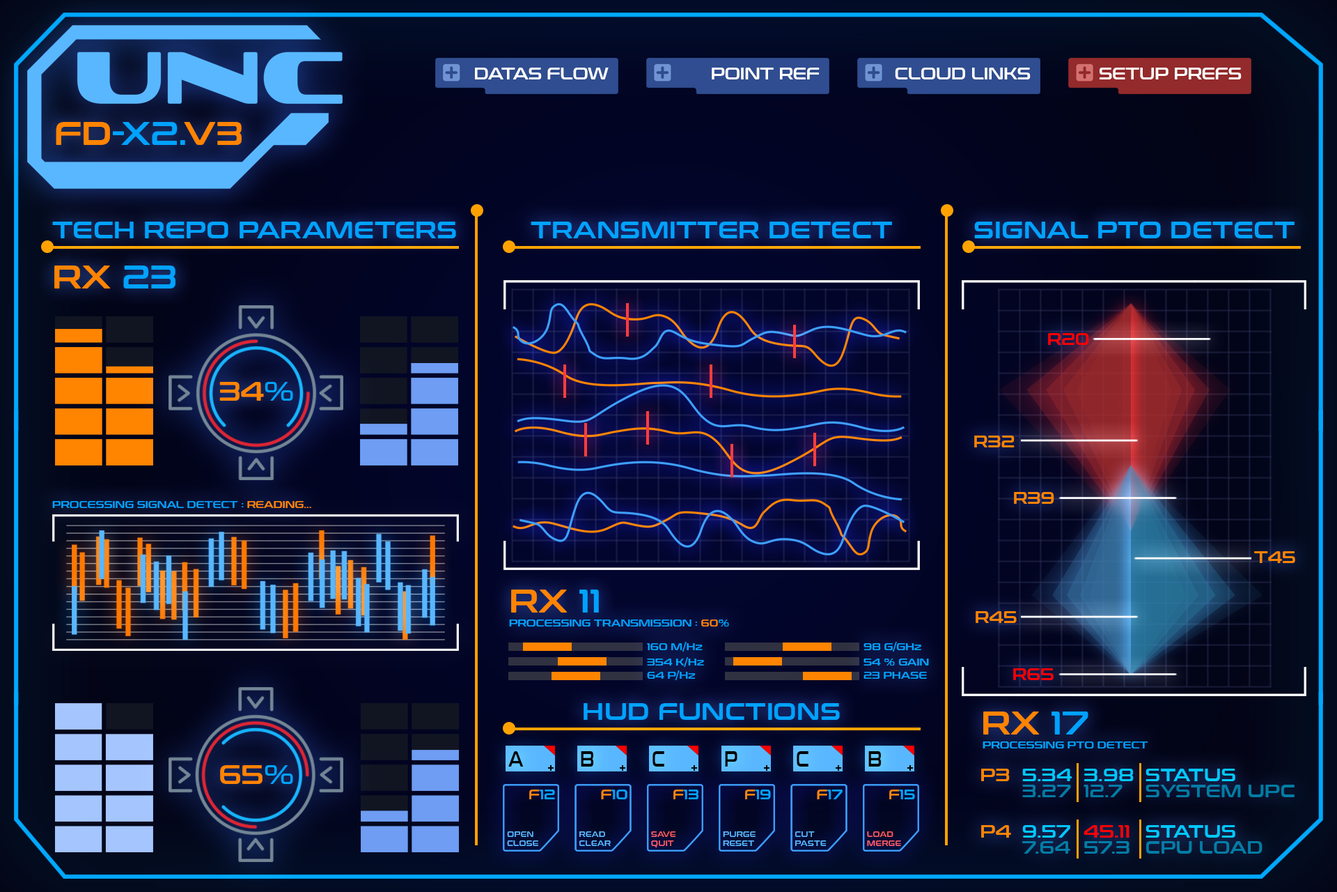
<style>
.page{position:relative;width:1337px;height:892px}
.page>*{position:absolute;margin:0}
.t1{font:15.8px "ConthraxSb-Regular";color:#fffffe}
.t2{font:32.7px "ConthraxSb-Regular";color:#00a2ff}
.t3{font:32.7px "ConthraxSb-Regular";color:#ff8400}
.t4{font:24px "ConthraxSb-Regular";color:#00a2ff}
.t5{font:15.8px "ConthraxSb-Regular";color:#ff0000}
.t6{font:26.2px "ConthraxSb-Regular";color:#ff8400}
.t7{font:26.2px "ConthraxSb-Regular";color:#00a2ff}
.t8{font:15.8px "ConthraxSb-Regular";color:#ff8400}
.t9{font:9.8px "ConthraxSb-Regular";color:#00a2ff}
.t10{font:9.8px "ConthraxSb-Regular";color:#ff8400}
.t11{font:21.3px "ConthraxSb-Regular";color:#010100;scale:0.72 1}
.t12{font:17.7px "ConthraxSb-Regular";color:#ff8400}
.t13{font:17.7px "ConthraxSb-Regular";color:#00c6ff}
.t14{font:17.7px "ConthraxSb-Regular";color:#027ca5}
.t15{font:17.7px "ConthraxSb-Regular";color:#027ca3}
.t16{font:13.2px "ConthraxSb-Regular";color:#00a2ff}
.t17{font:13.2px "ConthraxSb-Regular";color:#ff8400}
.t18{font:7.4px "ConthraxSb-Regular";color:#5bbaff}
.t19{font:7.4px "ConthraxSb-Regular";color:#ff5c68}
.t20{font:7.4px "ConthraxSb-Regular";color:#ff5c6a}
.t21{font:17.7px "ConthraxSb-Regular";color:#ff0000}
.t22{font:17.7px "ConthraxSb-Regular";color:#027da6}
.t23{font:17.7px "ConthraxSb-Regular";color:#027da5}
</style>
<div class="page">
<p class="t1" style="left:475px;top:68px;width:134px;height:11px">DATAS FLOW</p>
<p class="t1" style="left:712px;top:68px;width:108px;height:11px">POINT REF</p>
<p class="t1" style="left:895px;top:68px;width:136px;height:11px">CLOUD LINKS</p>
<p class="t1" style="left:1100px;top:68px;width:142px;height:11px">SETUP PREFS</p>
<p class="t2" style="left:56px;top:122px;width:186px;height:23px"><span class="t3">FD</span>-X2.<span class="t3">V3</span></p>
<p class="t4" style="left:52px;top:222px;width:404px;height:16px">TECH REPO PARAMETERS</p>
<p class="t4" style="left:531px;top:222px;width:361px;height:16px">TRANSMITTER DETECT</p>
<p class="t4" style="left:974px;top:222px;width:321px;height:16px">SIGNAL PTO DETECT</p>
<p class="t3" style="left:54px;top:265px;width:122px;height:23px">RX<span class="t2"> 23</span></p>
<p class="t5" style="left:1048px;top:333px;width:41px;height:12px">R20</p>
<p class="t6" style="left:219px;top:382px;width:74px;height:19px">34<span class="t7">%</span></p>
<p class="t8" style="left:974px;top:435px;width:41px;height:12px">R32</p>
<p class="t8" style="left:1014px;top:492px;width:41px;height:12px">R39</p>
<p class="t9" style="left:52px;top:501px;width:259px;height:7px">PROCESSING SIGNAL DETECT : <span class="t10">READING...</span></p>
<p class="t8" style="left:1255px;top:551px;width:41px;height:12px">T45</p>
<p class="t3" style="left:511px;top:589px;width:88px;height:23px">RX<span class="t2"> 11</span></p>
<p class="t8" style="left:976px;top:611px;width:41px;height:12px">R45</p>
<p class="t9" style="left:509px;top:619px;width:220px;height:7px">PROCESSING TRANSMISSION : <span class="t10">60</span>%</p>
<p class="t9" style="left:647px;top:642px;width:56px;height:9px">160 M/Hz</p>
<p class="t9" style="left:864px;top:642px;width:58px;height:9px">98 G/GHz</p>
<p class="t9" style="left:647px;top:657px;width:57px;height:10px">354 K/Hz</p>
<p class="t9" style="left:864px;top:658px;width:65px;height:7px">54 % GAIN</p>
<p class="t9" style="left:647px;top:670px;width:48px;height:10px">64 P/Hz</p>
<p class="t9" style="left:864px;top:671px;width:63px;height:7px">23 PHASE</p>
<p class="t5" style="left:1014px;top:668px;width:40px;height:12px">R65</p>
<p class="t4" style="left:584px;top:703px;width:256px;height:17px">HUD FUNCTIONS</p>
<p class="t3" style="left:984px;top:711px;width:105px;height:23px">RX<span class="t2"> 17</span></p>
<p class="t9" style="left:983px;top:741px;width:166px;height:7px">PROCESSING PTO DETECT</p>
<p class="t11" style="left:508px;top:751px;width:16px;height:15px">A</p>
<p class="t11" style="left:581px;top:751px;width:13px;height:15px">B</p>
<p class="t11" style="left:653px;top:751px;width:12px;height:15px">C</p>
<p class="t11" style="left:725px;top:751px;width:13px;height:15px">P</p>
<p class="t11" style="left:797px;top:751px;width:12px;height:15px">C</p>
<p class="t11" style="left:869px;top:751px;width:13px;height:15px">B</p>
<p class="t6" style="left:220px;top:765px;width:73px;height:19px">65<span class="t7">%</span></p>
<p class="t12" style="left:981px;top:768px;width:29px;height:13px">P3</p>
<p class="t13" style="left:1023px;top:768px;width:49px;height:13px">5.34</p>
<p class="t13" style="left:1085px;top:768px;width:49px;height:13px">3.98</p>
<p class="t13" style="left:1146px;top:768px;width:90px;height:13px">STATUS</p>
<p class="t14" style="left:1023px;top:784px;width:48px;height:13px">3.27</p>
<p class="t14" style="left:1084px;top:784px;width:39px;height:13px">12.7</p>
<p class="t15" style="left:1146px;top:784px;width:149px;height:13px">SYSTEM UPC</p>
<p class="t16" style="left:529px;top:789px;width:26px;height:10px"><span class="t17">F</span>12</p>
<p class="t16" style="left:601px;top:789px;width:27px;height:10px"><span class="t17">F</span>10</p>
<p class="t16" style="left:674px;top:789px;width:25px;height:10px"><span class="t17">F</span>13</p>
<p class="t16" style="left:745px;top:789px;width:26px;height:10px"><span class="t17">F</span>19</p>
<p class="t16" style="left:817px;top:789px;width:26px;height:10px"><span class="t17">F</span>17</p>
<p class="t16" style="left:890px;top:789px;width:25px;height:10px"><span class="t17">F</span>15</p>
<p class="t18" style="left:507px;top:831px;width:31px;height:15px">OPEN<br>CLOSE</p>
<p class="t18" style="left:580px;top:831px;width:31px;height:15px">READ<br>CLEAR</p>
<p class="t19" style="left:651px;top:831px;width:25px;height:16px">SAVE<br>QUIT</p>
<p class="t18" style="left:723px;top:831px;width:33px;height:15px">PURGE<br>RESET</p>
<p class="t18" style="left:795px;top:831px;width:32px;height:15px">CUT<br>PASTE</p>
<p class="t20" style="left:867px;top:831px;width:34px;height:15px">LOAD<br>MERGE</p>
<p class="t12" style="left:981px;top:825px;width:30px;height:12px">P4</p>
<p class="t13" style="left:1023px;top:825px;width:48px;height:12px">9.57</p>
<p class="t21" style="left:1084px;top:825px;width:46px;height:12px">45.11</p>
<p class="t13" style="left:1146px;top:825px;width:90px;height:12px">STATUS</p>
<p class="t22" style="left:1023px;top:841px;width:48px;height:12px">7.64</p>
<p class="t22" style="left:1085px;top:841px;width:45px;height:12px">57.3</p>
<p class="t23" style="left:1147px;top:841px;width:116px;height:12px">CPU LOAD</p>
</div>
